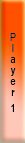
<style>
.page{position:relative;width:25px;height:143px}
.page>*{position:absolute;margin:0}
.t1{font:11px "ArialNarrow";color:#000000}
</style>
<div class="page">
<p class="t1" style="left:10px;top:33px;width:6px;height:79px;text-align:center">Player  1</p>
</div>
